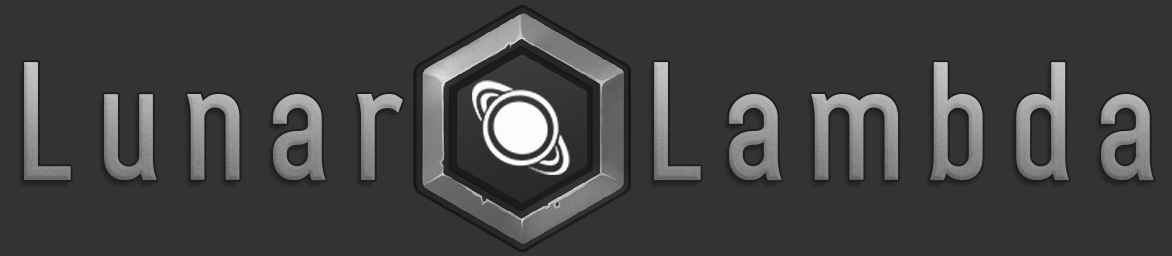
<style>
.page{position:relative;width:1172px;height:256px;background:#333333}
.page>*{position:absolute;margin:0}
.t1{font:157.8px "HomePlanetBB-Bold";letter-spacing:0.1em}
</style>
<div class="page">
<p class="t1" style="left:24px;top:62px;width:1130px;height:119px">Lunar    Lambda</p>
</div>
